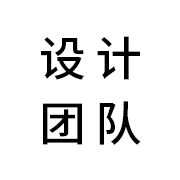
<style>
.page{position:relative;width:180px;height:180px;background:#ffffff}
.page>*{position:absolute;margin:0}
.t1{font:47px/65px "SourceHanSansCN-Medium";letter-spacing:0.2em;color:#000000}
</style>
<div class="page">
<p class="t1" style="left:41px;top:36px;width:100px;height:109px">设计<br>团队</p>
</div>
